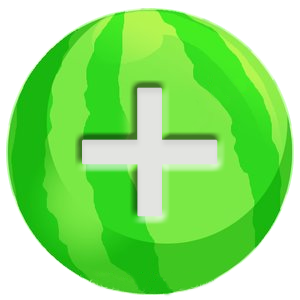
<style>
.page{position:relative;width:300px;height:300px;background:#ffffff}
.page>*{position:absolute;margin:0}
.t1{font:485px "Mj_Flow-Bold";color:#e3e4e1;font-weight:bold}
</style>
<div class="page">
<p class="t1" style="left:82px;top:87px;width:136px;height:130px">+</p>
</div>
